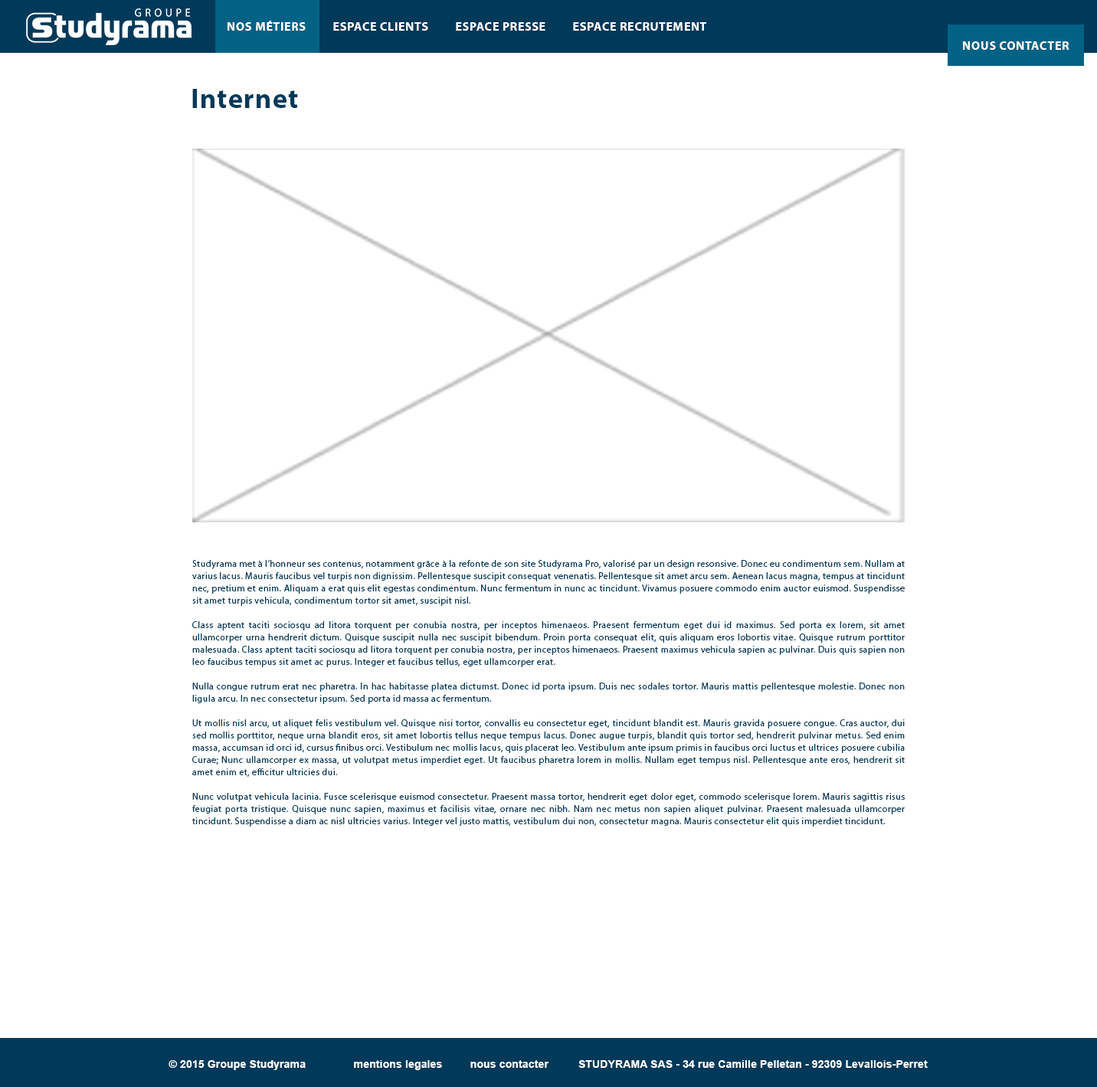
<style>
.page{position:relative;width:1097px;height:1087px;background:#ffffff}
.page>*{position:absolute;margin:0}
.t1{font:12.3px "MyriadPro-Bold";letter-spacing:0.04em;color:#ffffff;text-transform:uppercase}
.t2{font:27.6px "MyriadPro-Bold";letter-spacing:0.04em;color:#003959}
.t3{font:9.2px/12.3px "MyriadPro-Regular";letter-spacing:0.04em;color:#003959}
.t4{font:13px/23px "MyriadPro-Bold";letter-spacing:0.04em;color:#003959}
.t5{font:10.7px "Arial-BoldMT";letter-spacing:0.01em;color:#ffffff}
.t6{font:10.7px "Arial-BoldMT";letter-spacing:0.01em;color:#ffffff;text-transform:uppercase}
</style>
<div class="page">
<p class="t1" style="left:228px;top:21px;width:478px;height:10px">nos métiers         espace clients         espace presse         espace recrutement</p>
<p class="t1" style="left:228px;top:21px;width:78px;height:10px">nos métiers</p>
<p class="t1" style="left:963px;top:41px;width:106px;height:9px">Nous contacter</p>
<p class="t2" style="left:192px;top:89px;width:106px;height:19px">Internet</p>
<p class="t3" style="left:192px;top:560px;width:713px;height:267px"><span class="t4"><br><br></span>Studyrama met à l’honneur ses contenus, notamment grâce à la refonte de son site Studyrama Pro, valorisé par un design resonsive. Donec eu condimentum sem. Nullam at varius lacus. Mauris faucibus vel turpis non dignissim. Pellentesque suscipit consequat venenatis. Pellentesque sit amet arcu sem. Aenean lacus magna, tempus at tincidunt nec, pretium et enim. Aliquam a erat quis elit egestas condimentum. Nunc fermentum in nunc ac tincidunt. Vivamus posuere commodo enim auctor euismod. Suspendisse sit amet turpis vehicula, condimentum tortor sit amet, suscipit nisl.<br><br>Class aptent taciti sociosqu ad litora torquent per conubia nostra, per inceptos himenaeos. Praesent fermentum eget dui id maximus. Sed porta ex lorem, sit amet ullamcorper urna hendrerit dictum. Quisque suscipit nulla nec suscipit bibendum. Proin porta consequat elit, quis aliquam eros lobortis vitae. Quisque rutrum porttitor malesuada. Class aptent taciti sociosqu ad litora torquent per conubia nostra, per inceptos himenaeos. Praesent maximus vehicula sapien ac pulvinar. Duis quis sapien non leo faucibus tempus sit amet ac purus. Integer et faucibus tellus, eget ullamcorper erat.<br><br>Nulla congue rutrum erat nec pharetra. In hac habitasse platea dictumst. Donec id porta ipsum. Duis nec sodales tortor. Mauris mattis pellentesque molestie. Donec non ligula arcu. In nec consectetur ipsum. Sed porta id massa ac fermentum.<br><br>Ut mollis nisl arcu, ut aliquet felis vestibulum vel. Quisque nisi tortor, convallis eu consectetur eget, tincidunt blandit est. Mauris gravida posuere congue. Cras auctor, dui sed mollis porttitor, neque urna blandit eros, sit amet lobortis tellus neque tempus lacus. Donec augue turpis, blandit quis tortor sed, hendrerit pulvinar metus. Sed enim massa, accumsan id orci id, cursus finibus orci. Vestibulum nec mollis lacus, quis placerat leo. Vestibulum ante ipsum primis in faucibus orci luctus et ultrices posuere cubilia Curae; Nunc ullamcorper ex massa, ut volutpat metus imperdiet eget. Ut faucibus pharetra lorem in mollis. Nullam eget tempus nisl. Pellentesque ante eros, hendrerit sit amet enim et, efficitur ultricies dui.<br><br>Nunc volutpat vehicula lacinia. Fusce scelerisque euismod consectetur. Praesent massa tortor, hendrerit eget dolor eget, commodo scelerisque lorem. Mauris sagittis risus feugiat porta tristique. Quisque nunc sapien, maximus et facilisis vitae, ornare nec nibh. Nam nec metus non sapien aliquet pulvinar. Praesent malesuada ullamcorper tincidunt. Suspendisse a diam ac nisl ultricies varius. Integer vel justo mattis, vestibulum dui non, consectetur magna. Mauris consectetur elit quis imperdiet tincidunt.</p>
<p class="t5" style="left:169px;top:1060px;width:137px;height:10px">© <span class="t6">2015 G</span>roupe Studyrama</p>
<p class="t5" style="left:354px;top:1060px;width:194px;height:10px">mentions legales         nous contacter</p>
<p class="t5" style="left:578px;top:1060px;width:350px;height:8px">STUDYRAMA SAS - 34 rue Camille Pelletan - 92309 Levallois-Perret</p>
</div>
